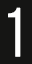
<style>
.page{position:relative;width:32px;height:64px;background:#151514}
.page>*{position:absolute;margin:0}
.t1{font:63px "HGGothicM";color:#ffffff;font-weight:bold}
</style>
<div class="page">
<p class="t1" style="left:8px;top:7px;width:13px;height:50px">1</p>
</div>
